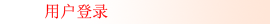
<style>
.page{position:relative;width:270px;height:24px;background:#ffffff}
.page>*{position:absolute;margin:0}
.t1{font:16px "SimSun";color:#ff0000}
</style>
<div class="page">
<p class="t1" style="left:45px;top:3px;width:63px;height:16px">用户登录</p>
</div>
